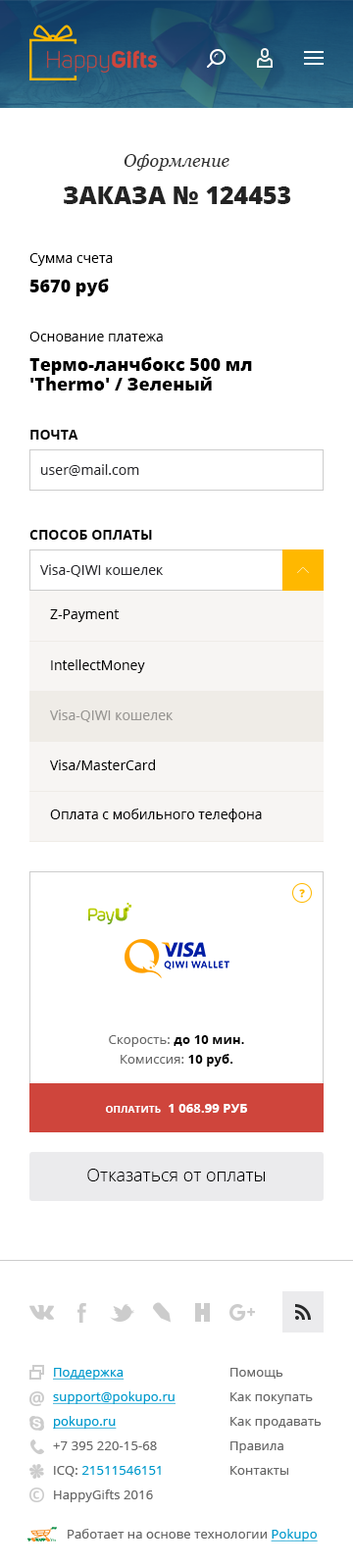
<style>
.page{position:relative;width:353px;height:1568px;background:#ffffff}
.page>*{position:absolute;margin:0}
.t1{font:17.7px "Georgia-Italic";color:#333333}
.t2{font:24.5px "OpenSans-Extrabold";color:#232323;text-transform:uppercase}
.t3{font:13.7px/29.4px "OpenSans";color:#000000}
.t4{font:17.7px/29.4px "OpenSans-Extrabold";color:#000000}
.t5{font:17.7px/19.6px "OpenSans-Extrabold";color:#000000}
.t6{font:13.7px/19.6px "OpenSans";color:#000000}
.t7{font:13.7px "OpenSans-Bold";color:#010101;text-transform:uppercase}
.t8{font:13.7px "OpenSans";color:#28282c}
.t9{font:13.7px "OpenSans";color:#000000}
.t10{font:13.7px "OpenSans";color:#989693}
.t11{font:12.8px/19.6px "OpenSans-Bold";letter-spacing:0.01em;color:#000000}
.t12{font:12.8px/19.6px "OpenSans";letter-spacing:0.01em;color:#666666}
.t13{font:12.8px "OpenSans-Bold";letter-spacing:0.01em;color:#ffffff;text-transform:uppercase}
.t14{font:9.8px "OpenSans-Bold";letter-spacing:0.01em;color:#ffffff;text-transform:uppercase}
.t15{font:17.7px "OpenSans-Light";color:#000000}
</style>
<div class="page">
<p class="t1" style="left:124px;top:154px;width:106px;height:17px">Оформление</p>
<p class="t2" style="left:64px;top:186px;width:227px;height:18px">заказа № 124453</p>
<p class="t3" style="left:29px;top:253px;width:84px;height:43px">Сумма счета<br><span class="t4">5670 руб</span></p>
<p class="t5" style="left:29px;top:332px;width:223px;height:59px"><span class="t6">Основание платежа<br></span>Термо-ланчбокс 500 мл <br>'Thermo' / Зеленый</p>
<p class="t7" style="left:30px;top:430px;width:48px;height:10px">Почта</p>
<p class="t8" style="left:41px;top:464px;width:98px;height:12px">user@mail.com</p>
<p class="t7" style="left:29px;top:530px;width:123px;height:10px">способ оплаты</p>
<p class="t8" style="left:40px;top:564px;width:124px;height:13px">Visa-QIWI кошелек</p>
<p class="t9" style="left:50px;top:609px;width:69px;height:13px">Z-Payment</p>
<p class="t9" style="left:51px;top:659px;width:94px;height:14px">IntellectMoney</p>
<p class="t10" style="left:50px;top:709px;width:124px;height:13px">Visa-QIWI кошелек</p>
<p class="t9" style="left:50px;top:759px;width:105px;height:11px">Visa/MasterCard</p>
<p class="t9" style="left:50px;top:809px;width:212px;height:13px">Оплата с мобильного телефона</p>
<p class="t11" style="left:109px;top:1035px;width:135px;height:32px;text-align:center"><span class="t12">Скорость: </span>до 10 мин.<br><span class="t12">Комиссия: </span>10 руб.</p>
<p class="t13" style="left:106px;top:1104px;width:141px;height:9px"><span class="t14">оплатить</span>  1 068.99 руб</p>
<p class="t15" style="left:87px;top:1169px;width:178px;height:12px">Отказаться от оплаты</p>
</div>
